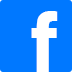
<style>
.page{position:relative;width:72px;height:72px;background:#0078ff}
.page>*{position:absolute;margin:0}
.t1{font:90.1px "FranklinGothic-DemiCond";letter-spacing:0.1em;color:#ffffff}
</style>
<div class="page">
<p class="t1" style="left:31px;top:11px;width:27px;height:61px">f</p>
</div>
